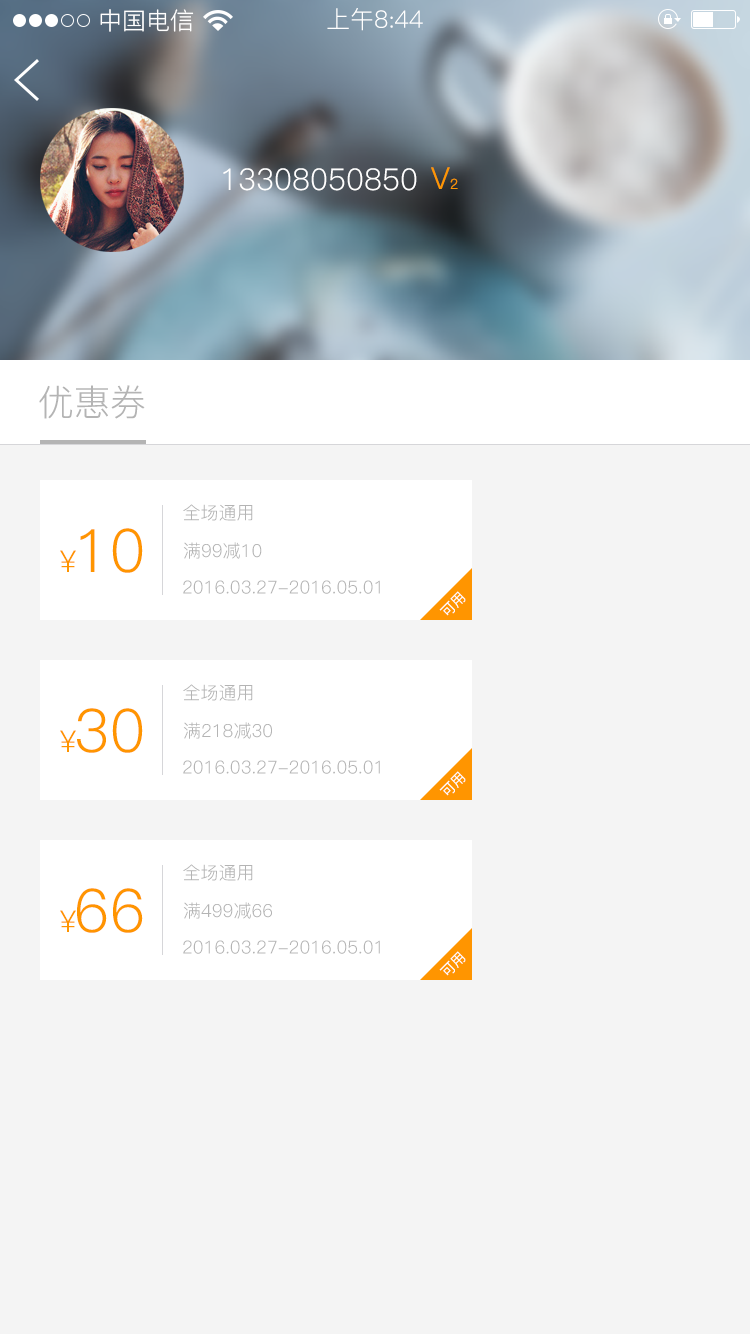
<style>
.page{position:relative;width:750px;height:1334px;background:#f4f4f4}
.page>*{position:absolute;margin:0}
.t1{font:24px "PingFang-SC-Regular";color:#ffffff}
.t2{font:30px "PingFang-SC-Regular";color:#ffffff}
.t3{font:30px "PingFang-SC-Regular";color:#fe9603}
.t4{font:14px "PingFang-SC-Regular";color:#fe9603}
.t5{font:36px "PingFang-SC-Regular";color:#b4b4b4}
.t6{font:18px "PingFang-SC-Regular";color:#b4b4b4}
.t7{font:60px "PingFang-SC-Regular";color:#ff9500}
.t8{font:30px "PingFang-SC-Regular";color:#ff9500}
.t9{font:14px "PingFang-SC-Regular";color:#ffffff}
</style>
<div class="page">
<p class="t1" style="left:100px;top:9px;width:94px;height:23px">中国电信</p>
<p class="t1" style="left:327px;top:8px;width:96px;height:23px">上午8:44</p>
<p class="t2" style="left:223px;top:168px;width:194px;height:23px">13308050850</p>
<p class="t3" style="left:431px;top:167px;width:27px;height:22px">V<span class="t4">2</span></p>
<p class="t5" style="left:39px;top:385px;width:106px;height:34px">优惠券</p>
<p class="t6" style="left:183px;top:504px;width:70px;height:17px">全场通用</p>
<p class="t7" style="left:80px;top:528px;width:63px;height:45px">10</p>
<p class="t6" style="left:183px;top:542px;width:79px;height:17px">满99减10</p>
<p class="t8" style="left:60px;top:550px;width:16px;height:22px">¥</p>
<p class="t6" style="left:183px;top:580px;width:197px;height:14px">2016.03.27-2016.05.01</p>
<p class="t9" style="left:439px;top:591px;width:27px;height:25px;rotate:-45deg">可用</p>
<p class="t6" style="left:183px;top:684px;width:70px;height:17px">全场通用</p>
<p class="t7" style="left:77px;top:708px;width:66px;height:45px">30</p>
<p class="t6" style="left:183px;top:722px;width:89px;height:17px">满218减30</p>
<p class="t8" style="left:60px;top:730px;width:16px;height:22px">¥</p>
<p class="t6" style="left:183px;top:760px;width:197px;height:14px">2016.03.27-2016.05.01</p>
<p class="t9" style="left:439px;top:771px;width:27px;height:25px;rotate:-45deg">可用</p>
<p class="t6" style="left:183px;top:864px;width:70px;height:17px">全场通用</p>
<p class="t7" style="left:77px;top:888px;width:66px;height:45px">66</p>
<p class="t6" style="left:183px;top:902px;width:89px;height:17px">满499减66</p>
<p class="t8" style="left:60px;top:910px;width:16px;height:22px">¥</p>
<p class="t6" style="left:183px;top:940px;width:197px;height:14px">2016.03.27-2016.05.01</p>
<p class="t9" style="left:439px;top:951px;width:27px;height:25px;rotate:-45deg">可用</p>
</div>
